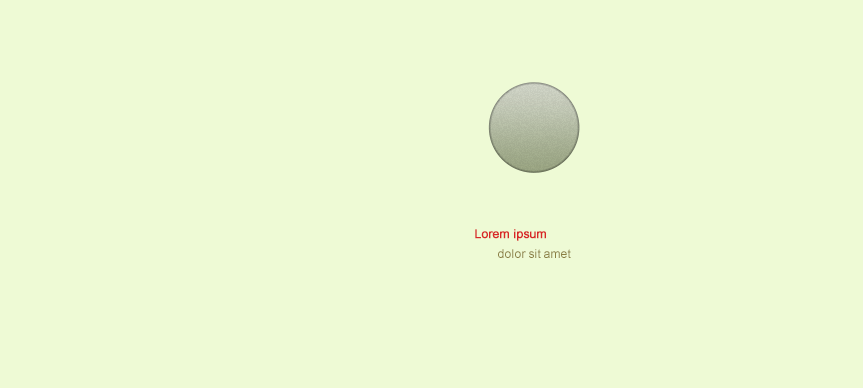
<style>
.page{position:relative;width:863px;height:388px;background:#eefad5}
.page>*{position:absolute;margin:0}
.t1{font:12px "ArialMT";color:#d82727;font-weight:bold}
.t2{font:12px "ArialMT";color:#8a7e42}
</style>
<div class="page">
<p class="t1" style="left:475px;top:229px;width:71px;height:12px">Lorem ipsum</p>
<p class="t2" style="left:498px;top:249px;width:73px;height:9px">dolor sit amet</p>
</div>
